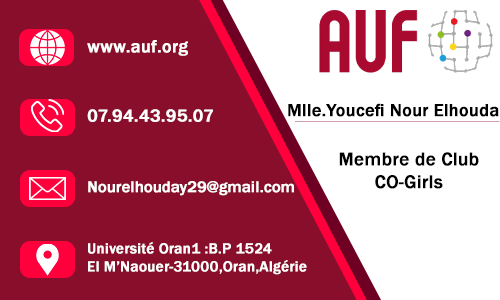
<style>
.page{position:relative;width:500px;height:300px;background:#890e2b}
.page>*{position:absolute;margin:0}
.t1{font:18px "FranklinGothic-Medium";color:#ffffff;font-weight:bold}
.t2{font:18px "FranklinGothic-Medium";color:#000000;font-weight:bold}
.t3{font:19px "FranklinGothic-Medium";color:#000000;font-weight:bold}
.t4{font:16px "FranklinGothic-Medium";color:#ffffff;font-weight:bold}
.t5{font:15px "FranklinGothic-Medium";color:#ffffff;font-weight:bold}
</style>
<div class="page">
<p class="t1" style="left:87px;top:40px;width:101px;height:16px">www.auf.org</p>
<p class="t1" style="left:87px;top:109px;width:126px;height:13px">07.94.43.95.07</p>
<p class="t2" style="left:288px;top:103px;width:211px;height:14px">Mlle.Youcefi Nour Elhouda</p>
<p class="t3" style="left:339px;top:152px;width:140px;height:37px;text-align:center">Membre de Club <br>CO-Girls</p>
<p class="t4" style="left:88px;top:181px;width:206px;height:15px">Nourelhouday29@gmail.com</p>
<p class="t5" style="left:88px;top:242px;width:219px;height:33px">Université Oran1 :B.P 1524<br>El M’Naouer-31000,Oran,Algérie</p>
</div>
